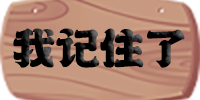
<style>
.page{position:relative;width:200px;height:100px}
.page>*{position:absolute;margin:0}
.t1{font:50px "-";letter-spacing:-0.02em;color:#000000;font-weight:bold}
</style>
<div class="page">
<p class="t1" style="left:13px;top:28px;width:172px;height:40px">我记住了</p>
</div>
